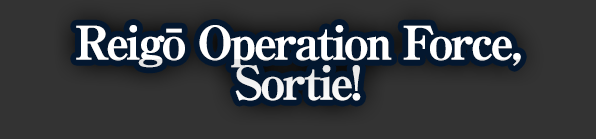
<style>
.page{position:relative;width:596px;height:139px;background:#333333}
.page>*{position:absolute;margin:0}
.t1{font:46px/40px "RyuminPro-ExBold";letter-spacing:-0.08em;color:#ffffff;font-weight:bold}
</style>
<div class="page">
<p class="t1" style="left:76px;top:25px;width:445px;height:76px;text-align:center">Reigō Operation Force,<br>Sortie!</p>
</div>
